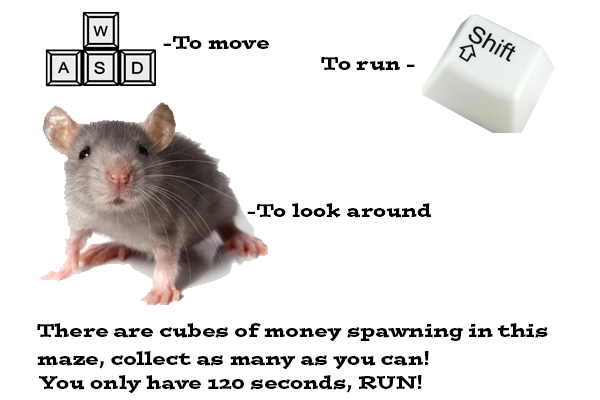
<style>
.page{position:relative;width:600px;height:400px;background:#ffffff}
.page>*{position:absolute;margin:0}
.t1{font:18px "PostinoStd";color:#000000}
</style>
<div class="page">
<p class="t1" style="left:163px;top:36px;width:106px;height:13px">-To move</p>
<p class="t1" style="left:321px;top:57px;width:94px;height:14px">To run -</p>
<p class="t1" style="left:37px;top:323px;width:511px;height:19px">There are cubes of money spawning in this</p>
<p class="t1" style="left:37px;top:351px;width:392px;height:19px">maze, collect as many as you can!</p>
<p class="t1" style="left:39px;top:375px;width:383px;height:19px">You only have 120 seconds, RUN!</p>
</div>
